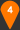
<style>
.page{position:relative;width:20px;height:30px;background:#ff7800}
.page>*{position:absolute;margin:0}
.t1{font:9px "OpenSans";color:#ffffff;font-weight:bold}
</style>
<div class="page">
<p class="t1" style="left:7px;top:6px;width:6px;height:8px">4</p>
</div>
